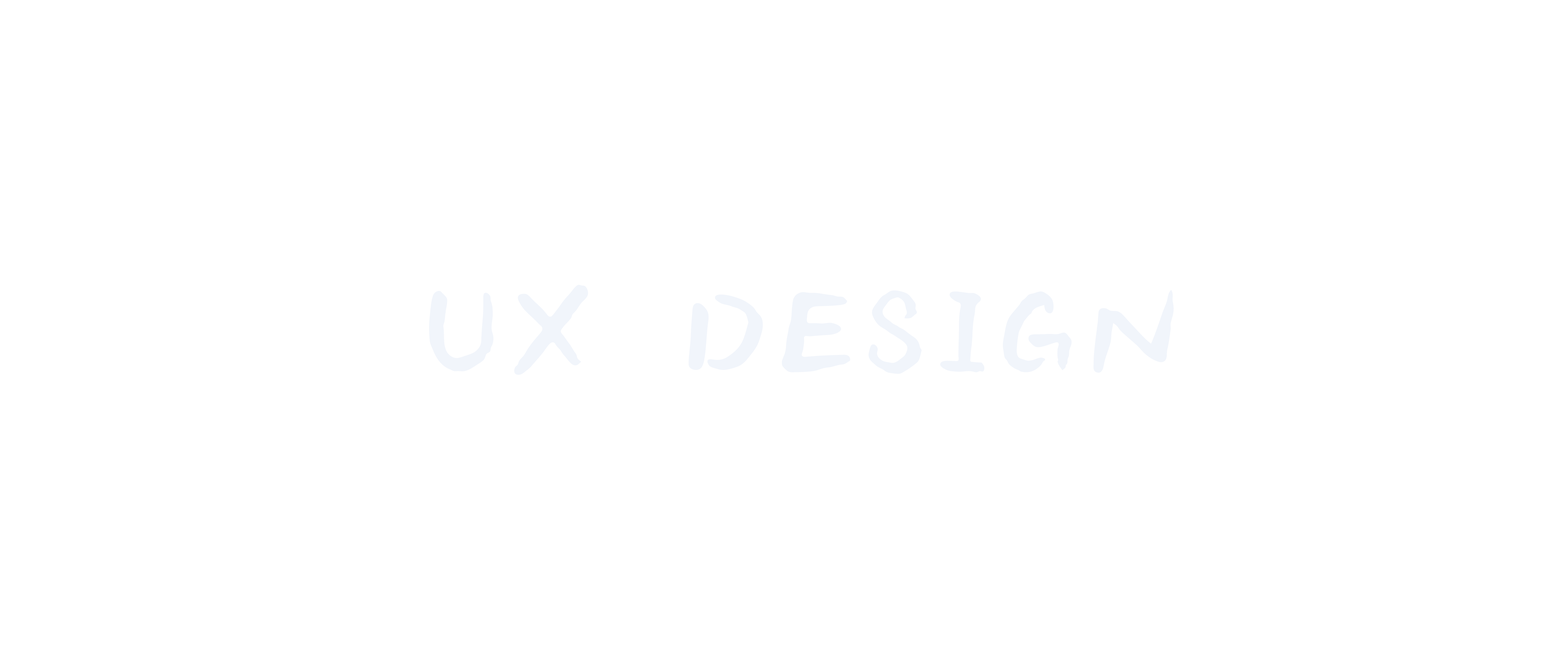
<style>
.page{position:relative;width:1568px;height:671px;background:#ffffff}
.page>*{position:absolute;margin:0}
.t1{font:134.1px "XiQuexiaoqingsong-regular";color:#f1f5fb}
</style>
<div class="page">
<p class="t1" style="left:429px;top:285px;width:745px;height:90px">UX DESIGN</p>
</div>
